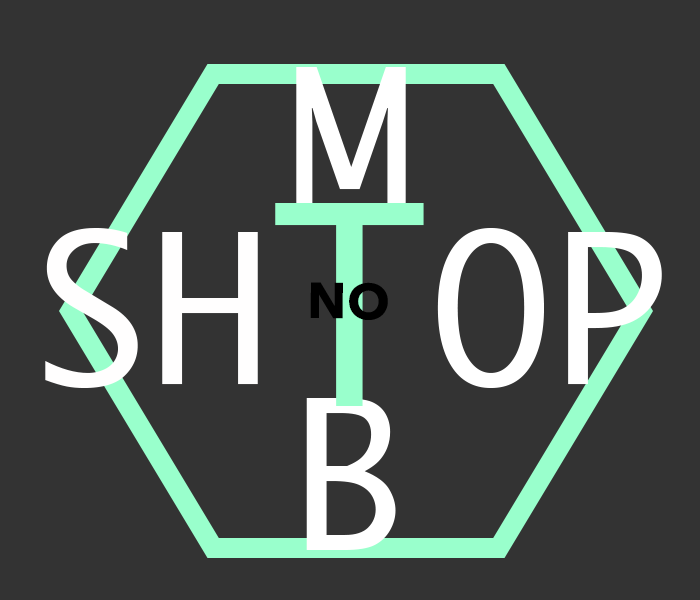
<style>
.page{position:relative;width:700px;height:600px;background:#333333}
.page>*{position:absolute;margin:0}
.t1{font:200px "Monaco";color:#ffffff}
.t2{font:268px "Monaco";color:#99ffcc}
.t3{font:200px "Monaco";color:#fffefe}
.t4{font:50px "AvenirNext-Bold";color:#000000}
</style>
<div class="page">
<p class="t1" style="left:296px;top:67px;width:110px;height:152px">M</p>
<p class="t2" style="left:275px;top:203px;width:149px;height:203px">T</p>
<p class="t3" style="left:45px;top:228px;width:617px;height:160px">SH <span class="t1">OP</span></p>
<p class="t4" style="left:310px;top:282px;width:78px;height:38px">NO</p>
<p class="t1" style="left:306px;top:398px;width:90px;height:152px">B</p>
</div>
